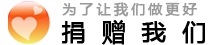
<style>
.page{position:relative;width:208px;height:45px;background:#ffffff}
.page>*{position:absolute;margin:0}
.t1{font:14px "MicrosoftYaHei";letter-spacing:0.2em;color:#999999;font-weight:bold}
.t2{font:24px "MicrosoftYaHei";color:#000000;font-weight:bold}
</style>
<div class="page">
<p class="t1" style="left:62px;top:2px;width:135px;height:15px">为了让我们做更好</p>
<p class="t2" style="left:61px;top:20px;width:144px;height:25px">捐  赠  我  们</p>
</div>
